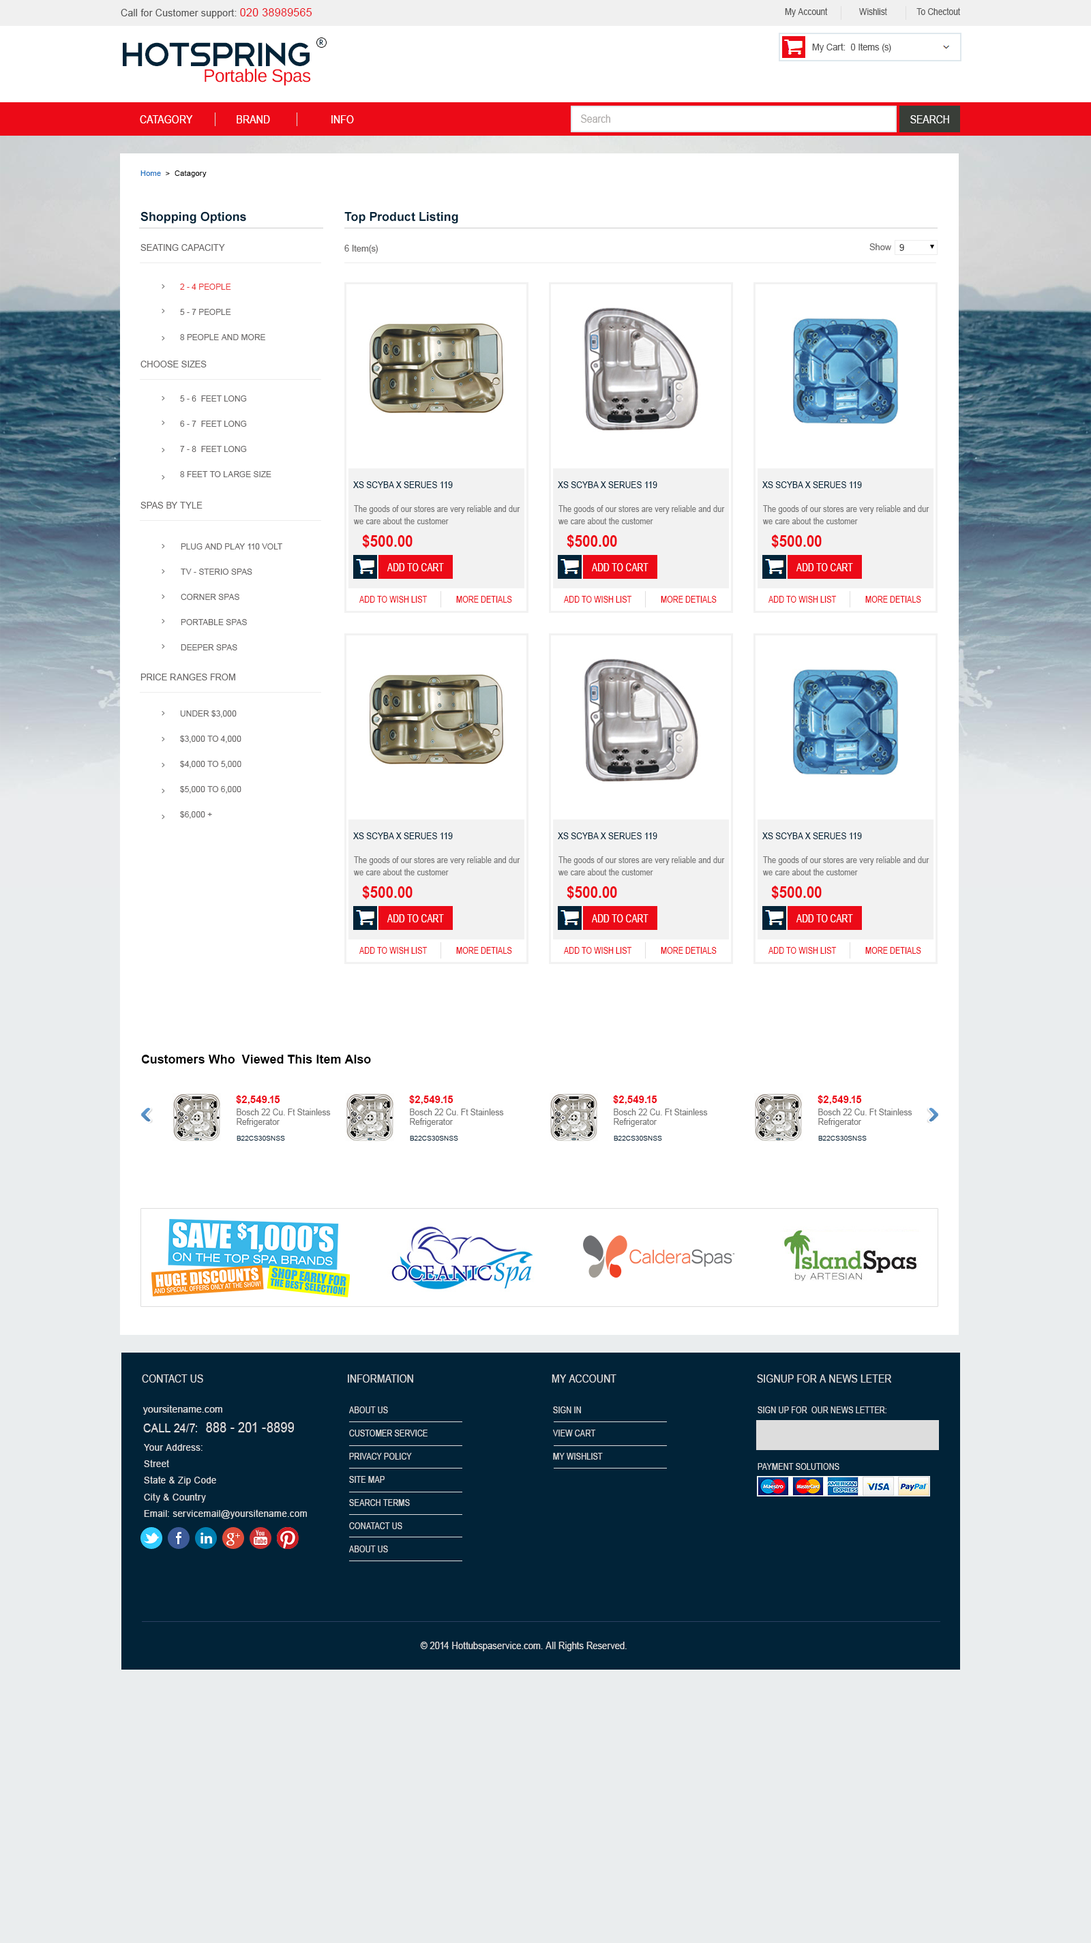
<style>
.page{position:relative;width:1091px;height:1943px;background:#ffffff}
.page>*{position:absolute;margin:0}
.t1{font:10px "ArialMT";letter-spacing:0.02em;color:#555555;scale:0.95 1}
.t2{font:11.5px "ArialMT";letter-spacing:0.02em;color:#ec0a17;scale:0.95 1}
.t3{font:9.4px "ArialMT";color:#555555;scale:0.87 1}
.t4{font:7.2px "HarmoniaSansStd-Regular";letter-spacing:0.03em;color:#012338}
.t5{font:43.7px "Telegrafico";letter-spacing:-0.08em;color:#012338}
.t6{font:9.3px "ArialMT";color:#555555;scale:0.95 1}
.t7{font:18px "LiberationSans";letter-spacing:-0.02em;color:#ec0a17}
.t8{font:11px "ArialMT";letter-spacing:0.01em;color:#ffffff;scale:0.87 1}
.t9{font:11px "ArialMT";color:#aeaba9;scale:0.87 1}
.t10{font:11px "ArialMT";color:#ffffff;scale:0.87 1}
.t11{font:7.5px "ArialMT";letter-spacing:0.02em;color:#000000}
.t12{font:7.5px "ArialMT";letter-spacing:0.02em;color:#1d70c0}
.t13{font:12.3px "Arial-BoldMT";color:#012338}
.t14{font:8.9px "ArialMT";color:#6a6868}
.t15{font:8.9px "ArialMT";color:#303030}
.t16{font:8.2px/25.2px "ArialMT";color:#6a6868}
.t17{font:8.2px/25.2px "ArialMT";color:#ea3a3c}
.t18{font:9.4px "ArialMT";color:#012338;text-transform:uppercase;scale:0.87 1}
.t19{font:8.6px/12.3px "ArialMT";letter-spacing:0.01em;color:#777777;scale:0.87 1}
.t20{font:15.7px "Arial-BoldMT";color:#ec0a17;text-transform:uppercase;scale:0.9 1}
.t21{font:11.3px "ArialMT";color:#ffffff;text-transform:uppercase;scale:0.75 1}
.t22{font:8.6px "ArialMT";color:#ec0a17;text-transform:uppercase;scale:0.87 1}
.t23{font:12.3px "Arial-BoldMT";color:#000000}
.t24{font:10.2px "Arial-BoldMT";color:#ec0a17}
.t25{font:9px/9.5px "ArialMT";color:#777777;scale:0.91 1}
.t26{font:6.8px "ArialMT";color:#012338}
.t27{font:11px "ArialMT";letter-spacing:0.01em;color:#dddddd;scale:0.87 1}
.t28{font:10.4px "ArialMT";letter-spacing:0.03em;color:#dddddd;scale:0.9 1}
.t29{font:8.6px/23.2px "ArialMT";letter-spacing:0.01em;color:#dddddd;scale:0.87 1}
.t30{font:8.6px "ArialMT";letter-spacing:0.01em;color:#dddddd;scale:0.87 1}
.t31{font:14.1px "ArialMT";letter-spacing:0.01em;color:#dddddd;scale:0.87 1}
.t32{font:12.5px "ArialMT";letter-spacing:0.01em;color:#dddddd;scale:0.87 1}
.t33{font:9.6px/16.4px "ArialMT";letter-spacing:0.03em;color:#dddddd;scale:0.94 1}
.t34{font:10.2px "ArialMT";letter-spacing:0.01em;color:#dddddd;scale:0.87 1}
</style>
<div class="page">
<p class="t1" style="left:121px;top:8px;width:191px;height:10px">Call for Customer support: <span class="t2">020 38989565</span></p>
<p class="t3" style="left:785px;top:7px;width:175px;height:10px">My Account              Wishlist             To Chectout</p>
<p class="t4" style="left:319px;top:40px;width:4px;height:5px">R</p>
<p class="t5" style="left:123px;top:42px;width:187px;height:24px">HotSpring</p>
<p class="t6" style="left:812px;top:43px;width:79px;height:9px">My Cart:  0 Items (s)</p>
<p class="t7" style="left:205px;top:68px;width:106px;height:18px">Portable Spas</p>
<p class="t8" style="left:140px;top:115px;width:214px;height:8px">CATAGORY                BRAND                      INFO</p>
<p class="t9" style="left:581px;top:115px;width:29px;height:8px">Search</p>
<p class="t10" style="left:910px;top:115px;width:39px;height:8px">SEARCH</p>
<p class="t11" style="left:140px;top:170px;width:67px;height:7px"><span class="t12">Home </span> &gt;  Catagory</p>
<p class="t13" style="left:140px;top:211px;width:106px;height:13px">Shopping Options</p>
<p class="t13" style="left:344px;top:212px;width:114px;height:12px">Top Product Listing</p>
<p class="t14" style="left:140px;top:244px;width:85px;height:7px">SEATING CAPACITY</p>
<p class="t14" style="left:344px;top:245px;width:34px;height:9px">6 Item(s)</p>
<p class="t14" style="left:869px;top:243px;width:22px;height:7px">Show</p>
<p class="t15" style="left:899px;top:244px;width:5px;height:7px">9</p>
<p class="t16" style="left:180px;top:284px;width:85px;height:56px;text-align:justify"><span class="t17">2 - 4 PEOPLE</span> <br>5 - 7 PEOPLE<br>8 PEOPLE AND MORE</p>
<p class="t14" style="left:140px;top:361px;width:67px;height:7px">CHOOSE SIZES</p>
<p class="t16" style="left:180px;top:395px;width:91px;height:82px;text-align:justify">5 - 6  FEET LONG <br>6 - 7  FEET LONG <br>7 - 8  FEET LONG<br>8 FEET TO LARGE SIZE</p>
<p class="t18" style="left:353px;top:481px;width:100px;height:7px">XS SCYBA X SERUES 119</p>
<p class="t18" style="left:558px;top:481px;width:99px;height:7px">XS SCYBA X SERUES 119</p>
<p class="t18" style="left:762px;top:481px;width:100px;height:7px">XS SCYBA X SERUES 119</p>
<p class="t14" style="left:140px;top:502px;width:62px;height:7px">SPAS BY TYLE</p>
<p class="t19" style="left:353px;top:505px;width:167px;height:19px;text-align:justify">The goods of our stores are very reliable and dur<br>we care about the customer</p>
<p class="t19" style="left:558px;top:505px;width:167px;height:19px;text-align:justify">The goods of our stores are very reliable and dur<br>we care about the customer</p>
<p class="t19" style="left:762px;top:505px;width:167px;height:19px;text-align:justify">The goods of our stores are very reliable and dur<br>we care about the customer</p>
<p class="t16" style="left:181px;top:543px;width:101px;height:107px;text-align:justify">PLUG AND PLAY 110 VOLT<br>TV - STERIO SPAS<br>CORNER SPAS<br>PORTABLE SPAS<br>DEEPER SPAS</p>
<p class="t20" style="left:362px;top:535px;width:50px;height:13px">$500.00</p>
<p class="t20" style="left:567px;top:535px;width:50px;height:13px">$500.00</p>
<p class="t20" style="left:771px;top:535px;width:51px;height:13px">$500.00</p>
<p class="t21" style="left:387px;top:563px;width:57px;height:8px">add to cart</p>
<p class="t21" style="left:592px;top:563px;width:56px;height:8px">add to cart</p>
<p class="t21" style="left:796px;top:563px;width:57px;height:8px">add to cart</p>
<p class="t22" style="left:359px;top:596px;width:68px;height:7px">Add to Wish list</p>
<p class="t22" style="left:456px;top:596px;width:56px;height:7px">More detials</p>
<p class="t22" style="left:564px;top:596px;width:68px;height:7px">Add to Wish list</p>
<p class="t22" style="left:661px;top:596px;width:56px;height:7px">More detials</p>
<p class="t22" style="left:768px;top:596px;width:69px;height:7px">Add to Wish list</p>
<p class="t22" style="left:865px;top:596px;width:56px;height:7px">More detials</p>
<p class="t14" style="left:140px;top:674px;width:95px;height:6px">PRICE RANGES FROM</p>
<p class="t16" style="left:180px;top:710px;width:61px;height:109px;text-align:justify">UNDER $3,000 <br>$3,000 TO 4,000<br>$4,000 TO 5,000<br>$5,000 TO 6,000<br>$6,000 +</p>
<p class="t18" style="left:353px;top:832px;width:100px;height:7px">XS SCYBA X SERUES 119</p>
<p class="t18" style="left:558px;top:832px;width:99px;height:7px">XS SCYBA X SERUES 119</p>
<p class="t18" style="left:762px;top:832px;width:100px;height:7px">XS SCYBA X SERUES 119</p>
<p class="t19" style="left:353px;top:856px;width:167px;height:19px;text-align:justify">The goods of our stores are very reliable and dur<br>we care about the customer</p>
<p class="t19" style="left:558px;top:856px;width:167px;height:19px;text-align:justify">The goods of our stores are very reliable and dur<br>we care about the customer</p>
<p class="t19" style="left:762px;top:856px;width:167px;height:19px;text-align:justify">The goods of our stores are very reliable and dur<br>we care about the customer</p>
<p class="t20" style="left:362px;top:886px;width:50px;height:13px">$500.00</p>
<p class="t20" style="left:567px;top:886px;width:50px;height:13px">$500.00</p>
<p class="t20" style="left:771px;top:886px;width:51px;height:13px">$500.00</p>
<p class="t21" style="left:387px;top:914px;width:57px;height:8px">add to cart</p>
<p class="t21" style="left:592px;top:914px;width:56px;height:8px">add to cart</p>
<p class="t21" style="left:796px;top:914px;width:57px;height:8px">add to cart</p>
<p class="t22" style="left:359px;top:947px;width:68px;height:7px">Add to Wish list</p>
<p class="t22" style="left:456px;top:947px;width:56px;height:7px">More detials</p>
<p class="t22" style="left:564px;top:947px;width:68px;height:7px">Add to Wish list</p>
<p class="t22" style="left:661px;top:947px;width:56px;height:7px">More detials</p>
<p class="t22" style="left:768px;top:947px;width:69px;height:7px">Add to Wish list</p>
<p class="t22" style="left:865px;top:947px;width:56px;height:7px">More detials</p>
<p class="t23" style="left:141px;top:1055px;width:230px;height:9px">Customers Who  Viewed This Item Also</p>
<p class="t24" style="left:236px;top:1095px;width:44px;height:10px">$2,549.15</p>
<p class="t24" style="left:409px;top:1095px;width:44px;height:10px">$2,549.15</p>
<p class="t24" style="left:613px;top:1095px;width:44px;height:10px">$2,549.15</p>
<p class="t24" style="left:817px;top:1095px;width:45px;height:10px">$2,549.15</p>
<p class="t25" style="left:237px;top:1109px;width:94px;height:18px;text-align:justify">Bosch 22 Cu. Ft Stainless<br>Refrigerator</p>
<p class="t25" style="left:410px;top:1109px;width:94px;height:18px;text-align:justify">Bosch 22 Cu. Ft Stainless<br>Refrigerator</p>
<p class="t25" style="left:614px;top:1109px;width:94px;height:18px;text-align:justify">Bosch 22 Cu. Ft Stainless<br>Refrigerator</p>
<p class="t25" style="left:818px;top:1109px;width:94px;height:18px;text-align:justify">Bosch 22 Cu. Ft Stainless<br>Refrigerator</p>
<p class="t26" style="left:237px;top:1136px;width:48px;height:5px">B22CS30SNSS</p>
<p class="t26" style="left:410px;top:1136px;width:48px;height:5px">B22CS30SNSS</p>
<p class="t26" style="left:614px;top:1136px;width:48px;height:5px">B22CS30SNSS</p>
<p class="t26" style="left:818px;top:1136px;width:49px;height:5px">B22CS30SNSS</p>
<p class="t27" style="left:142px;top:1375px;width:61px;height:8px">CONTACT US</p>
<p class="t27" style="left:348px;top:1375px;width:65px;height:8px">INFORMATION</p>
<p class="t27" style="left:552px;top:1375px;width:64px;height:8px">MY ACCOUNT</p>
<p class="t27" style="left:757px;top:1375px;width:135px;height:8px">SIGNUP FOR A NEWS LETER</p>
<p class="t28" style="left:142px;top:1405px;width:80px;height:10px">yoursitename.com</p>
<p class="t29" style="left:349px;top:1407px;width:78px;height:145px;text-align:justify">ABOUT US<br>CUSTOMER SERVICE<br>PRIVACY POLICY <br>SITE MAP<br>SEARCH TERMS<br>CONATACT US<br>ABOUT US</p>
<p class="t29" style="left:553px;top:1407px;width:50px;height:53px;text-align:justify">SIGN IN<br>VIEW CART<br>MY WISHLIST</p>
<p class="t30" style="left:758px;top:1407px;width:128px;height:6px">SIGN UP FOR  OUR NEWS LETTER:</p>
<p class="t31" style="left:143px;top:1422px;width:151px;height:10px"><span class="t32">CALL 24/7:  </span>888 - 201 -8899</p>
<p class="t33" style="left:144px;top:1444px;width:163px;height:75px;text-align:justify">Your Address:<br>Street<br>State &amp; Zip Code<br>City &amp; Country <br>Email: servicemail@yoursitename.com</p>
<p class="t30" style="left:758px;top:1463px;width:81px;height:7px">PAYMENT SOLUTIONS</p>
<p class="t34" style="left:420px;top:1642px;width:207px;height:9px">© 2014 Hottubspaservice.com. All Rights Reserved.</p>
</div>
